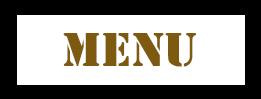
<style>
.page{position:relative;width:261px;height:99px;background:#ffffff}
.page>*{position:absolute;margin:0}
.t1{font:50px "Stencil";color:#7e5910}
</style>
<div class="page">
<p class="t1" style="left:63px;top:33px;width:134px;height:34px">MEnu</p>
</div>
